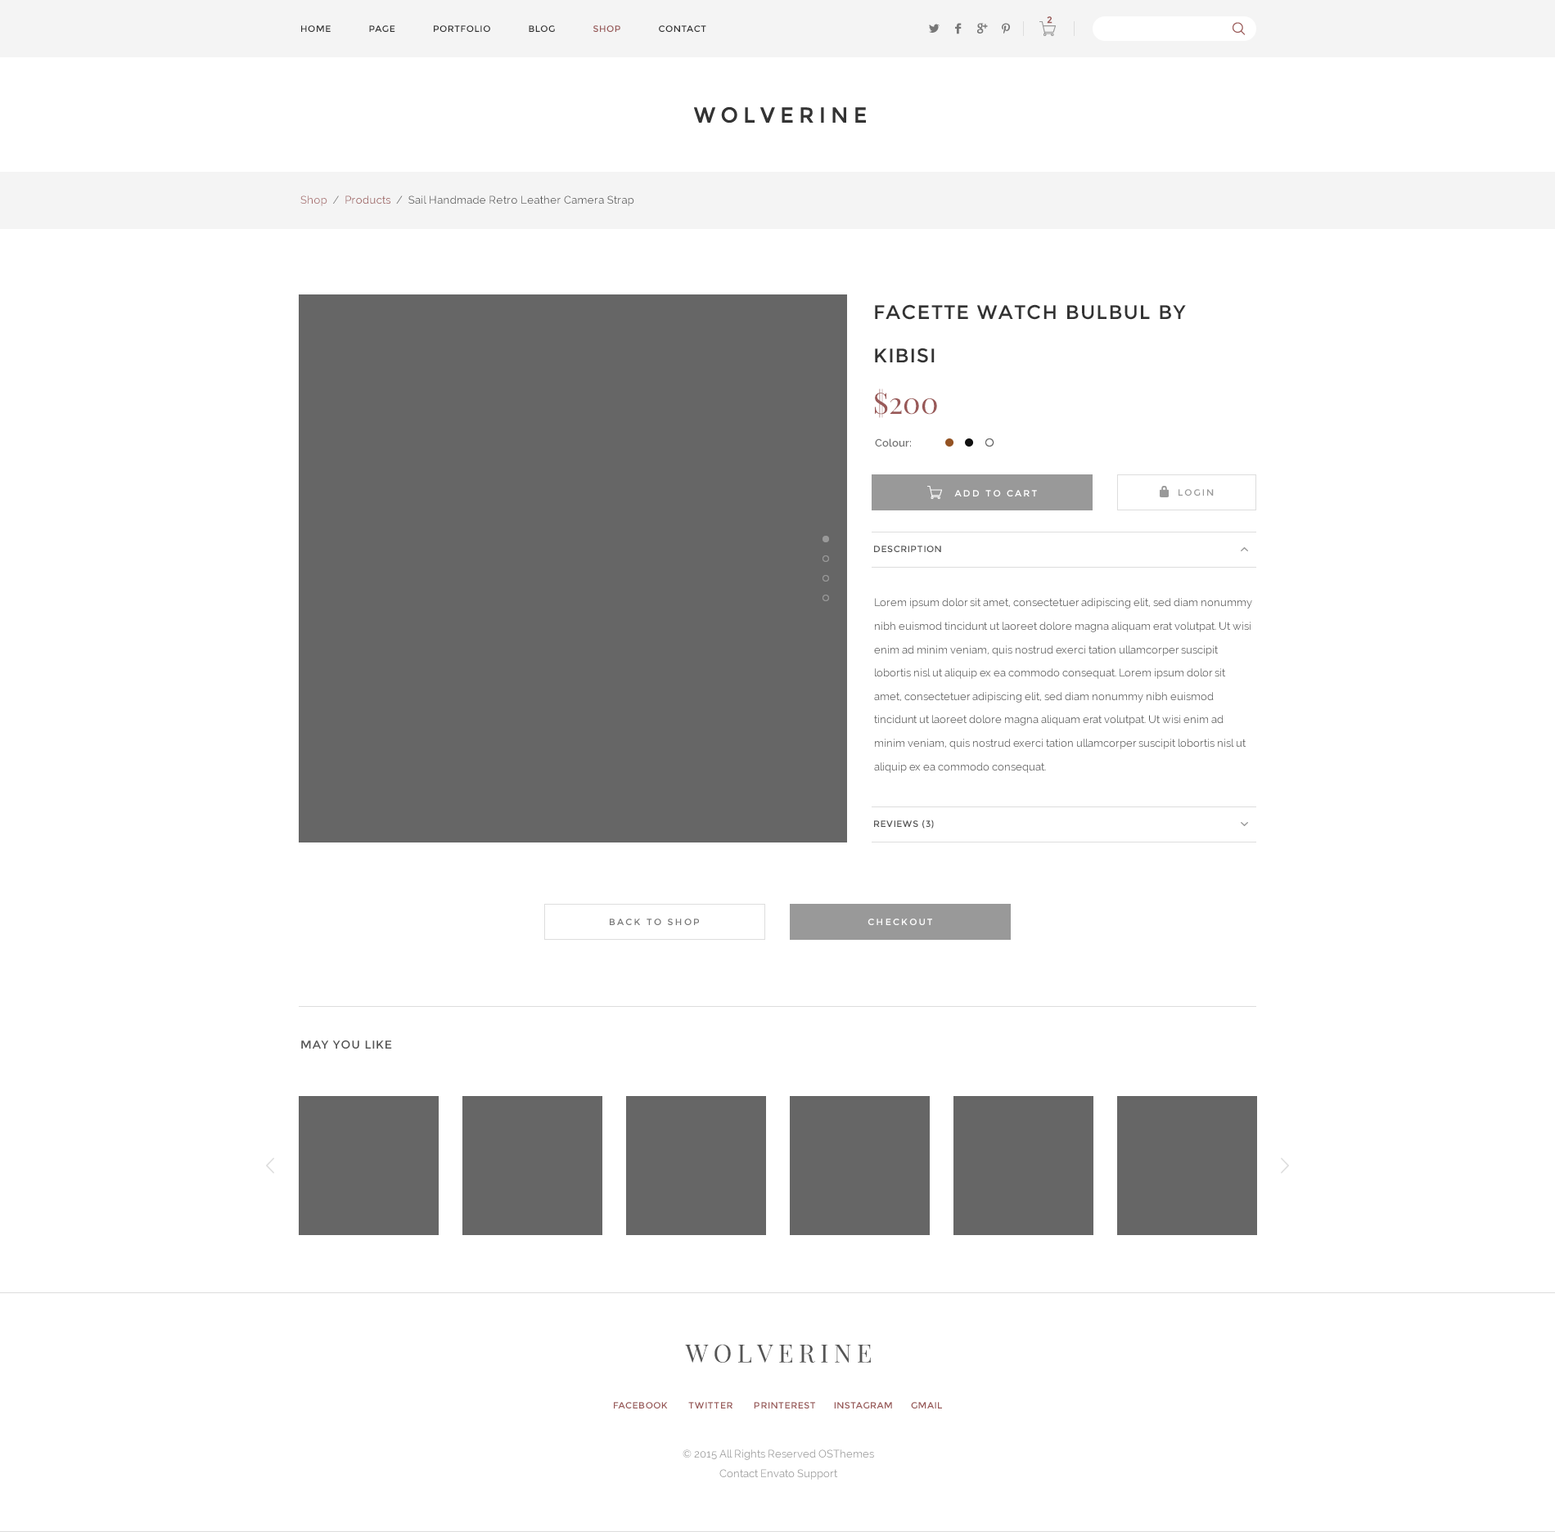
<style>
.page{position:relative;width:1555px;height:1532px;background:#ffffff}
.page>*{position:absolute;margin:0}
.t1{font:9px "Montserrat-Regular";color:#9a5a58;font-weight:bold}
.t2{font:9px "Montserrat-Regular";letter-spacing:0.05em;color:#333333}
.t3{font:9px "Montserrat-Regular";letter-spacing:0.05em;color:#995958}
.t4{font:10.6px "Raleway";letter-spacing:0.02em;color:#545454}
.t5{font:10.6px "Raleway";letter-spacing:0.02em;color:#a56c6c}
.t6{font:10.6px "Raleway";letter-spacing:0.02em;color:#777777}
.t7{font:10.6px "Raleway";letter-spacing:0.02em;color:#995958}
.t8{font:10.6px "Raleway";letter-spacing:0.02em;color:#666666}
.t9{font:19.6px/43.2px "Montserrat-Regular";letter-spacing:0.05em;color:#333333}
.t10{font:29.5px "PlayfairDisplay-Regular";color:#995958}
.t11{font:10.6px "Raleway-SemiBold";color:#777777}
.t12{font:9px "Montserrat-Regular";letter-spacing:0.2em;color:#ffffff}
.t13{font:9px "Montserrat-Regular";letter-spacing:0.2em;color:#999999}
.t14{font:9px "Montserrat-Regular";letter-spacing:0.05em;color:#555555}
.t15{font:10.6px/23.4px "Raleway";color:#555555}
.t16{font:9px "Montserrat-Regular";letter-spacing:0.05em;color:#545454}
.t17{font:9px "Montserrat-Regular";letter-spacing:0.2em;color:#777777}
.t18{font:11.5px "Montserrat-Regular";letter-spacing:0.05em;color:#555555}
.t19{font:25.3px "PlayfairDisplay-Regular";letter-spacing:0.1em;color:#555555}
.t20{font:10.6px/19.1px "Raleway";color:#999999}
</style>
<div class="page">
<p class="t1" style="left:1046px;top:16px;width:6px;height:8px">2</p>
<p class="t2" style="left:301px;top:25px;width:405px;height:7px">HOME      PAGE      PORTFOLIO      BLOG      <span class="t3">SHOP </span>     CONTACT</p>
<p class="t4" style="left:300px;top:196px;width:334px;height:10px"><span class="t5">Shop</span><span class="t6">  /  </span><span class="t7">Products</span><span class="t8">  /  </span>Sail Handmade Retro Leather Camera Strap</p>
<p class="t9" style="left:875px;top:304px;width:311px;height:59px">FACETTE WATCH BULBUL BY KIBISI</p>
<p class="t10" style="left:875px;top:389px;width:62px;height:29px">$200</p>
<p class="t11" style="left:875px;top:439px;width:36px;height:9px">Colour:</p>
<p class="t12" style="left:954px;top:490px;width:83px;height:7px">ADD TO CART</p>
<p class="t13" style="left:1178px;top:489px;width:35px;height:7px">LOGIN</p>
<p class="t14" style="left:874px;top:546px;width:67px;height:6px">DESCRIPTION</p>
<p class="t15" style="left:874px;top:598px;width:378px;height:175px">Lorem ipsum dolor sit amet, consectetuer adipiscing elit, sed diam nonummy nibh euismod tincidunt ut laoreet dolore magna aliquam erat volutpat. Ut wisi enim ad minim veniam, quis nostrud exerci tation ullamcorper suscipit lobortis nisl ut aliquip ex ea commodo consequat. Lorem ipsum dolor sit amet, consectetuer adipiscing elit, sed diam nonummy nibh euismod tincidunt ut laoreet dolore magna aliquam erat volutpat. Ut wisi enim ad minim veniam, quis nostrud exerci tation ullamcorper suscipit lobortis nisl ut aliquip ex ea commodo consequat.</p>
<p class="t16" style="left:874px;top:820px;width:60px;height:9px">REVIEWS (3)</p>
<p class="t17" style="left:610px;top:919px;width:89px;height:6px">BACK TO SHOP</p>
<p class="t12" style="left:867px;top:919px;width:65px;height:6px">CHECKOUT</p>
<p class="t18" style="left:301px;top:1041px;width:91px;height:8px">MAY YOU LIKE</p>
<p class="t19" style="left:685px;top:1344px;width:186px;height:19px">WOLVERINE</p>
<p class="t3" style="left:614px;top:1402px;width:328px;height:7px">FACEBOOK       TWITTER       PRINTEREST      INSTAGRAM      GMAIL</p>
<p class="t20" style="left:682px;top:1450px;width:192px;height:30px;text-align:center">© 2015 All Rights Reserved OSThemes<br>Contact Envato Support</p>
</div>
